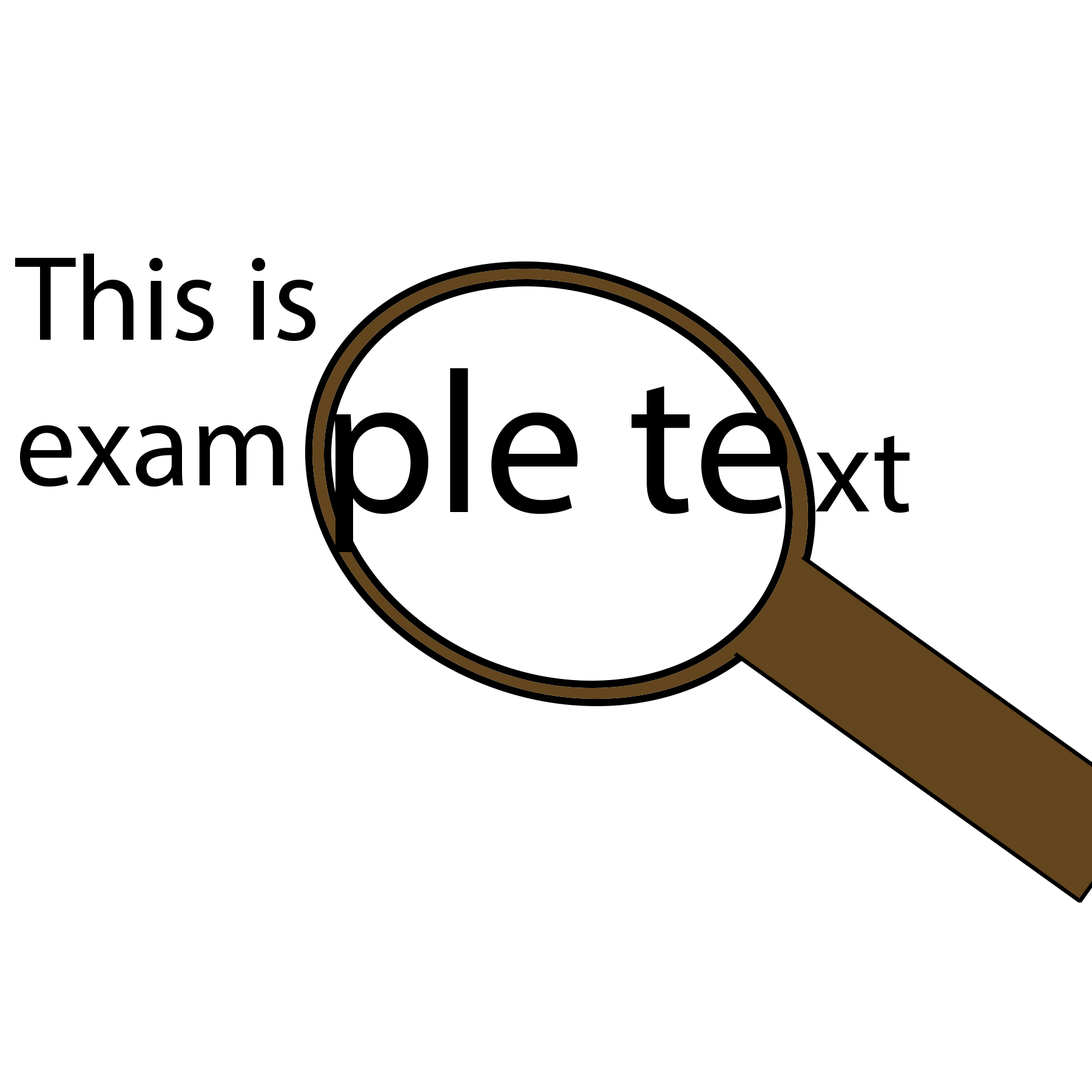
<style>
.page{position:relative;width:1092px;height:1092px;background:#ffffff}
.page>*{position:absolute;margin:0}
.t1{font:121.3px "MyriadPro-Regular";color:#000000}
.t2{font:202.2px "MyriadPro-Regular";color:#000000}
</style>
<div class="page">
<p class="t1" style="left:15px;top:254px;width:300px;height:233px">This is exam</p>
<p class="t2" style="left:334px;top:368px;width:453px;height:184px">ple te</p>
<p class="t1" style="left:815px;top:436px;width:95px;height:77px">xt</p>
</div>
